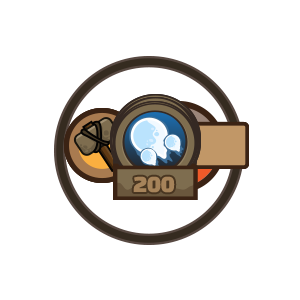
<style>
.page{position:relative;width:300px;height:300px;background:#ffffff}
.page>*{position:absolute;margin:0}
.t1{font:24px "ChangaOne";letter-spacing:-0.025em;color:#a6835a}
</style>
<div class="page">
<p class="t1" style="left:133px;top:176px;width:42px;height:17px">200</p>
</div>
